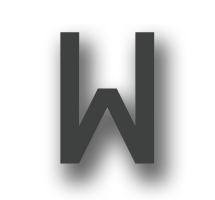
<style>
.page{position:relative;width:215px;height:200px;background:#ffffff}
.page>*{position:absolute;margin:0}
.t1{font:150px "Manteka";color:#3f4040}
</style>
<div class="page">
<p class="t1" style="left:60px;top:32px;width:95px;height:132px">W</p>
</div>
